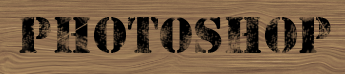
<style>
.page{position:relative;width:345px;height:74px}
.page>*{position:absolute;margin:0}
.t1{font:48px "StampPlain"}
</style>
<div class="page">
<p class="t1" style="left:19px;top:17px;width:312px;height:36px">PHOTOSHOP</p>
</div>
